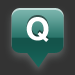
<style>
.page{position:relative;width:75px;height:75px;background:#333333}
.page>*{position:absolute;margin:0}
.t1{font:31.3px "HelveticaNeue-Bold";color:#ffffff}
</style>
<div class="page">
<p class="t1" style="left:26px;top:17px;width:23px;height:25px">Q</p>
</div>
